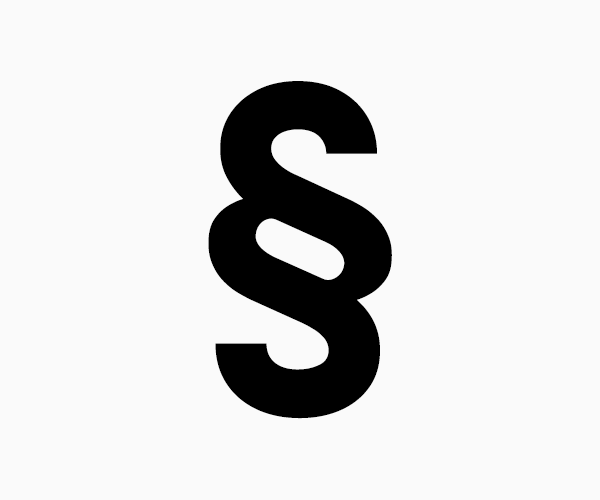
<style>
.page{position:relative;width:600px;height:500px;background:#fafafa}
.page>*{position:absolute;margin:0}
.t1{font:381px "Inter-Bold";color:#000000}
</style>
<div class="page">
<p class="t1" style="left:208px;top:81px;width:184px;height:338px">§</p>
</div>
